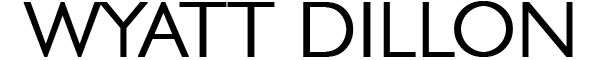
<style>
.page{position:relative;width:600px;height:60px;background:#ffffff}
.page>*{position:absolute;margin:0}
.t1{font:78.8px "Humanist521BT-Light";color:#000000;font-weight:bold}
</style>
<div class="page">
<p class="t1" style="left:23px;top:1px;width:550px;height:56px">WYATT DILLON</p>
</div>
